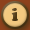
<style>
.page{position:relative;width:30px;height:30px}
.page>*{position:absolute;margin:0}
.t1{font:18px "CooperBlackStd";color:#543c15}
</style>
<div class="page">
<p class="t1" style="left:11px;top:8px;width:7px;height:13px">i</p>
</div>
